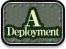
<style>
.page{position:relative;width:66px;height:49px}
.page>*{position:absolute;margin:0}
.t1{font:11px/9px "RyuminPro-ExBold";letter-spacing:-0.08em;color:#eaedc8}
.t2{font:22px/9px "RyuminPro-ExHeavy";letter-spacing:-0.08em;color:#eaedc8}
</style>
<div class="page">
<p class="t1" style="left:7px;top:9px;width:53px;height:28px;text-align:center"><span class="t2">A<br></span>Deployment</p>
</div>
